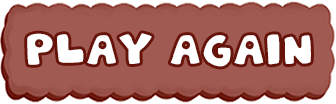
<style>
.page{position:relative;width:336px;height:104px;background:#a05a51}
.page>*{position:absolute;margin:0}
.t1{font:20px "PatchworkStitchlingsColor";letter-spacing:-0.025em;color:#ffffff}
</style>
<div class="page">
<p class="t1" style="left:27px;top:33px;width:284px;height:34px">play again</p>
</div>
